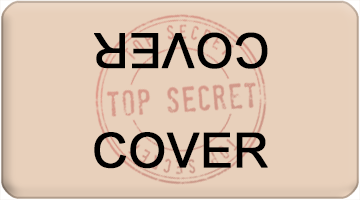
<style>
.page{position:relative;width:360px;height:200px;background:#e8d0bb}
.page>*{position:absolute;margin:0}
.t1{font:48px "ArialMT";color:#000000;font-weight:bold}
</style>
<div class="page">
<p class="t1" style="left:94px;top:32px;width:174px;height:37px;rotate:180deg">COVER</p>
<p class="t1" style="left:94px;top:132px;width:174px;height:37px">COVER</p>
</div>
